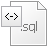
<style>
.page{position:relative;width:48px;height:48px;background:#ffffff}
.page>*{position:absolute;margin:0}
.t1{font:12.1px "Verdana";letter-spacing:-0.1em;color:#777777}
</style>
<div class="page">
<p class="t1" style="left:21px;top:21px;width:16px;height:12px">.sql</p>
</div>
